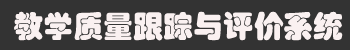
<style>
.page{position:relative;width:350px;height:50px;background:#333333}
.page>*{position:absolute;margin:0}
.t1{font:30px "STHupo";color:#faf1f1}
</style>
<div class="page">
<p class="t1" style="left:14px;top:11px;width:329px;height:30px">教学质量跟踪与评价系统</p>
</div>
